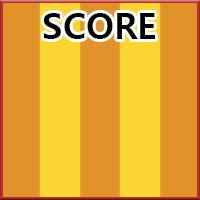
<style>
.page{position:relative;width:200px;height:200px;background:#e19228}
.page>*{position:absolute;margin:0}
.t1{font:36px "MalgunGothicBold";color:#000000}
</style>
<div class="page">
<p class="t1" style="left:43px;top:13px;width:112px;height:26px">SCORE</p>
</div>
